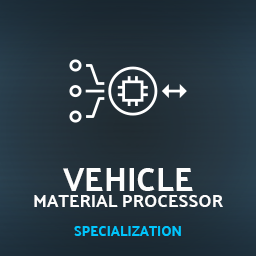
<style>
.page{position:relative;width:256px;height:256px}
.page>*{position:absolute;margin:0}
.t1{font:33px "PalanquinDark-Regular";color:#fcfcfc;text-transform:uppercase}
.t2{font:18px "PalanquinDark-Regular";color:#fcfcfc;text-transform:uppercase}
.t3{font:14px "PalanquinDark-Regular";color:#00c6fd;text-transform:uppercase}
</style>
<div class="page">
<p class="t1" style="left:63px;top:168px;width:130px;height:23px">VEHICLE</p>
<p class="t2" style="left:34px;top:195px;width:189px;height:12px">Material PROCESSOR</p>
<p class="t3" style="left:74px;top:226px;width:107px;height:10px">Specialization</p>
</div>
